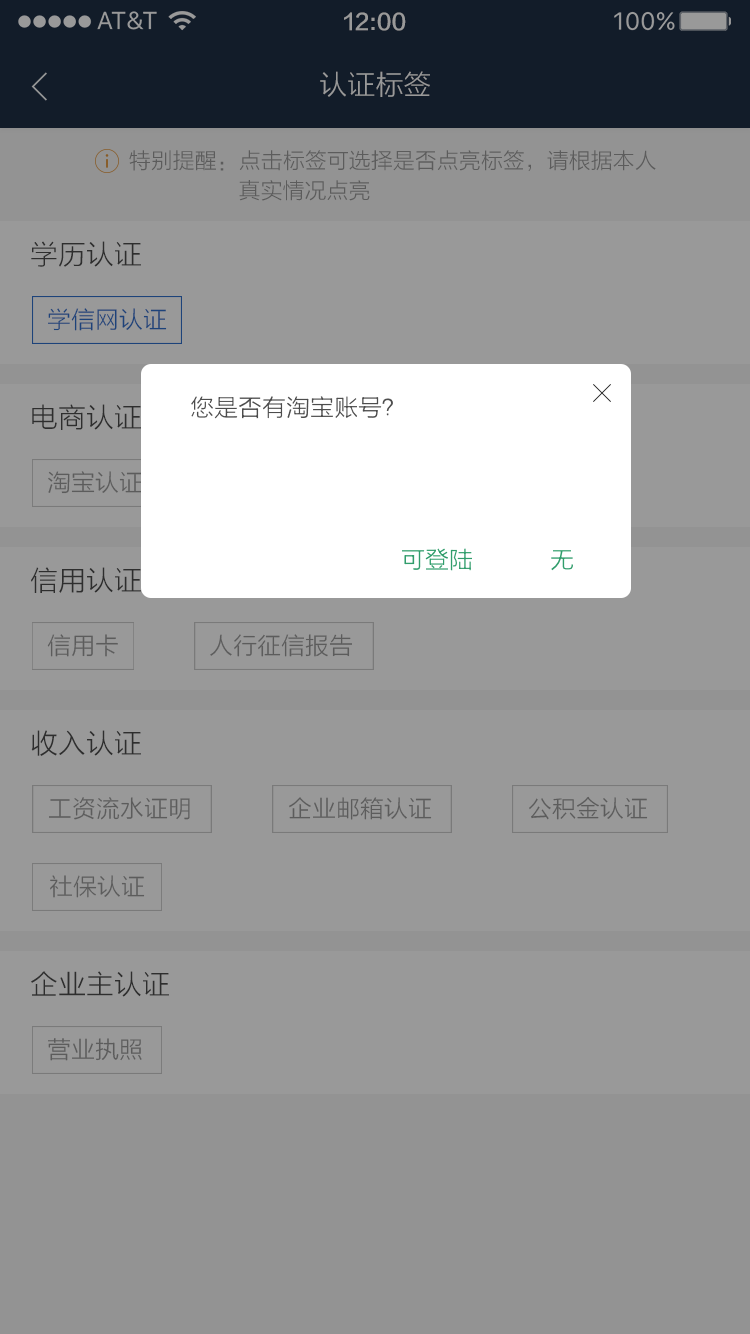
<style>
.page{position:relative;width:750px;height:1334px;background:#999999}
.page>*{position:absolute;margin:0}
.t1{font:22px "FZLTZHK--GBK1-0";color:#999999}
.t2{font:28px "FZLTXHK";color:#999999}
.t3{font:22px/30px "FZLTXHK";color:#5c5c5c}
.t4{font:28px "FZLTXHK";color:#2e2e2e}
.t5{font:24px "FZLTXHK";color:#1d437a}
.t6{font:24px "FZLTXHK";color:#4d4d4d}
.t7{font:24px "FZLTXHK";color:#5c5c5c}
.t8{font:24px "FZLTXHK";color:#319d6c}
</style>
<div class="page">
<p class="t1" style="left:344px;top:12px;width:62px;height:19px">12:00</p>
<p class="t2" style="left:320px;top:71px;width:110px;height:26px">认证标签</p>
<p class="t3" style="left:129px;top:150px;width:527px;height:51px">特别提醒：点击标签可选择是否点亮标签，请根据本人<br>                  真实情况点亮</p>
<p class="t4" style="left:31px;top:241px;width:110px;height:26px">学历认证</p>
<p class="t5" style="left:48px;top:308px;width:119px;height:23px">学信网认证</p>
<p class="t6" style="left:191px;top:396px;width:202px;height:23px">您是否有淘宝账号？</p>
<p class="t4" style="left:32px;top:404px;width:109px;height:26px">电商认证</p>
<p class="t7" style="left:48px;top:471px;width:95px;height:23px">淘宝认证</p>
<p class="t8" style="left:402px;top:548px;width:70px;height:23px">可登陆</p>
<p class="t8" style="left:551px;top:550px;width:22px;height:21px">无</p>
<p class="t4" style="left:31px;top:567px;width:110px;height:26px">信用认证</p>
<p class="t7" style="left:47px;top:634px;width:71px;height:23px">信用卡</p>
<p class="t7" style="left:210px;top:634px;width:142px;height:23px">人行征信报告</p>
<p class="t4" style="left:31px;top:730px;width:110px;height:26px">收入认证</p>
<p class="t7" style="left:49px;top:797px;width:141px;height:23px">工资流水证明</p>
<p class="t7" style="left:289px;top:797px;width:143px;height:23px">企业邮箱认证</p>
<p class="t7" style="left:529px;top:796px;width:119px;height:24px">公积金认证</p>
<p class="t7" style="left:50px;top:875px;width:95px;height:23px">社保认证</p>
<p class="t4" style="left:31px;top:971px;width:138px;height:26px">企业主认证</p>
<p class="t7" style="left:48px;top:1038px;width:94px;height:23px">营业执照</p>
</div>
